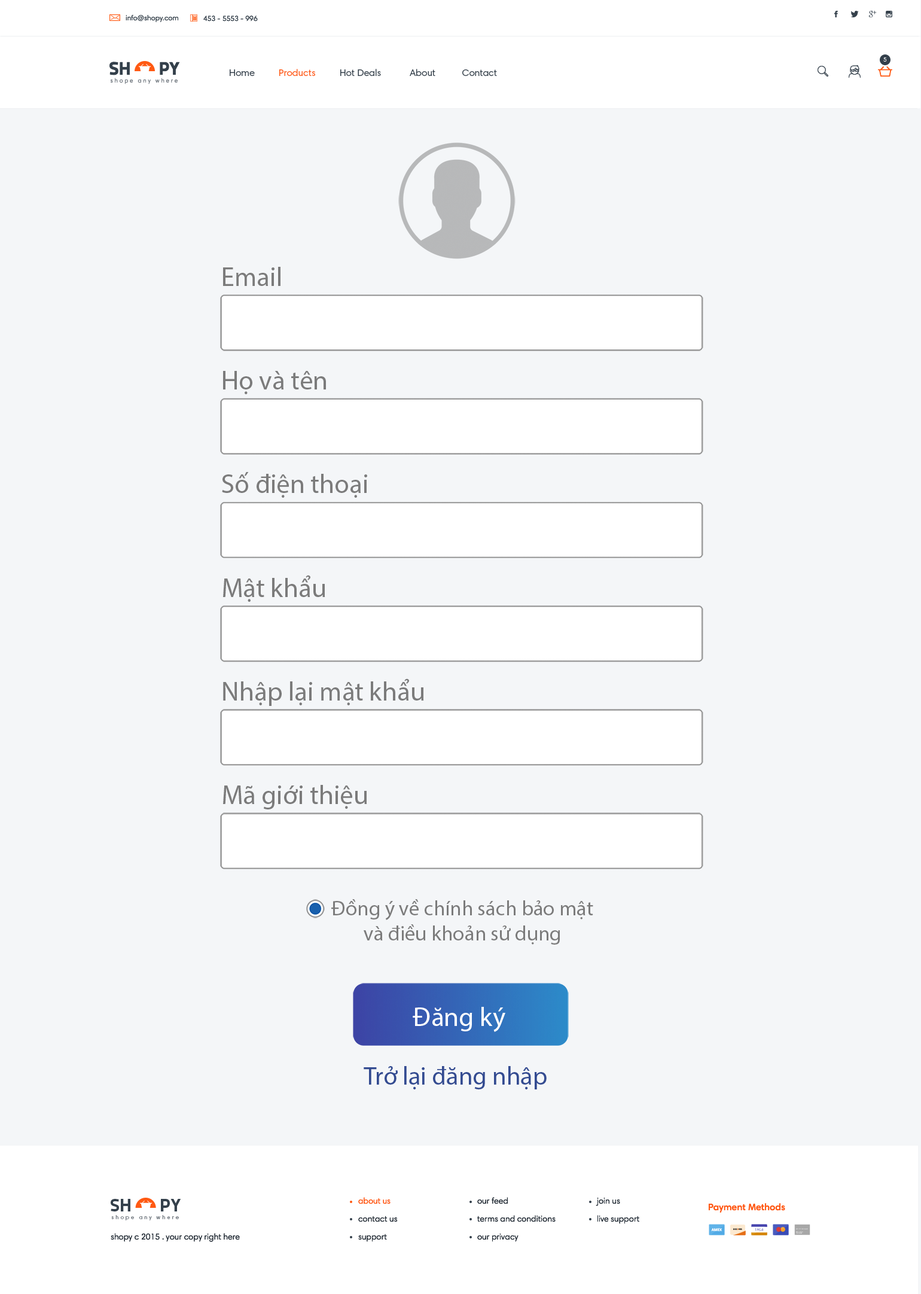
<style>
.page{position:relative;width:921px;height:1294px;background:#f4f6f8}
.page>*{position:absolute;margin:0}
.t1{font:7.2px "HarmoniaSansProCyr-Regular";color:#34404b}
.t2{font:17.9px "TitilliumText22L-XBold";color:#34404b}
.t3{font:6px "HarmoniaSansProCyr-Light";color:#ffffff}
.t4{font:10.2px "HarmoniaSansProCyr-Regular";letter-spacing:0.28em;color:#70777f}
.t5{font:9.6px "HarmoniaSansProCyr-Regular";color:#34404b}
.t6{font:9.6px "HarmoniaSansProCyr-Regular";color:#ff5912}
.t7{font:26.9px "MyriadPro-Regular";color:#7b7b7b}
.t8{font:20.9px "MyriadPro-Regular";color:#7b7b7b}
.t9{font:26.9px "MyriadPro-Regular";color:#ffffff}
.t10{font:25.4px "MyriadPro-Regular";color:#334b91}
.t11{font:8.4px/17.9px "HarmoniaSansProCyr-Regular";color:#28313b}
.t12{font:8.4px/17.9px "HarmoniaSansProCyr-Regular";color:#ff5912}
.t13{font:9.6px "HarmoniaSansProCyr-SemiBd";color:#ff5912}
.t14{font:8.4px "HarmoniaSansProCyr-Regular";color:#28313b}
</style>
<div class="page">
<p class="t1" style="left:126px;top:15px;width:53px;height:7px">info@shopy.com</p>
<p class="t1" style="left:203px;top:16px;width:55px;height:6px">996 - 5553 - 453</p>
<p class="t2" style="left:109px;top:62px;width:71px;height:13px">SH     PY</p>
<p class="t3" style="left:884px;top:57px;width:3px;height:5px">5</p>
<p class="t4" style="left:110px;top:78px;width:68px;height:6px">shope any where</p>
<p class="t5" style="left:230px;top:69px;width:267px;height:7px">Home          <span class="t6">Products          </span>Hot Deals            About           Contact</p>
<p class="t7" style="left:223px;top:267px;width:58px;height:19px">Email</p>
<p class="t7" style="left:223px;top:371px;width:103px;height:23px">Họ và tên</p>
<p class="t7" style="left:222px;top:472px;width:145px;height:26px">Số điện thoại</p>
<p class="t7" style="left:223px;top:575px;width:102px;height:27px">Mật khẩu</p>
<p class="t7" style="left:223px;top:678px;width:201px;height:28px">Nhập lại mật khẩu</p>
<p class="t7" style="left:223px;top:785px;width:144px;height:25px">Mã giới thiệu</p>
<p class="t8" style="left:331px;top:899px;width:263px;height:46px;text-align:center">Đồng ý về chính sách bảo mật<br>và điều khoản sử dụng</p>
<p class="t9" style="left:413px;top:1007px;width:93px;height:25px">Đăng ký</p>
<p class="t10" style="left:364px;top:1066px;width:183px;height:24px">Trở lại đăng nhập</p>
<p class="t2" style="left:111px;top:1199px;width:70px;height:13px">SH     PY</p>
<p class="t11" style="left:358px;top:1197px;width:40px;height:45px;text-align:right"><span class="t12">about us<br></span>contact us<br>support</p>
<p class="t11" style="left:477px;top:1197px;width:79px;height:45px;text-align:right">our feed<br>terms and conditions<br>our privacy</p>
<p class="t11" style="left:596px;top:1198px;width:44px;height:26px;text-align:right">join us<br>live support</p>
<p class="t13" style="left:708px;top:1203px;width:78px;height:10px">Payment Methods</p>
<p class="t4" style="left:111px;top:1215px;width:68px;height:6px">shope any where</p>
<p class="t14" style="left:111px;top:1233px;width:129px;height:9px">shopy c 2015 . your copy right here</p>
</div>
